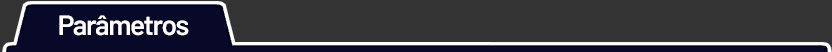
<style>
.page{position:relative;width:832px;height:52px;background:#333333}
.page>*{position:absolute;margin:0}
.t1{font:28px "Barlow-SemiBold";letter-spacing:-0.05em;color:#ffffff}
</style>
<div class="page">
<p class="t1" style="left:59px;top:15px;width:130px;height:21px">Parâmetros</p>
</div>
